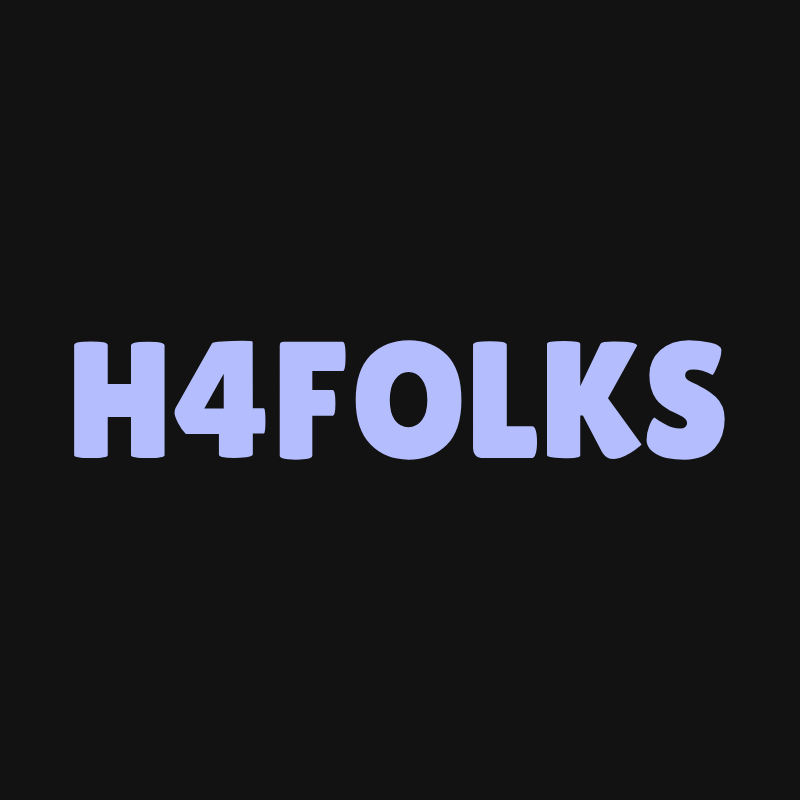
<style>
.page{position:relative;width:800px;height:800px;background:#121212}
.page>*{position:absolute;margin:0}
.t1{font:166.2px "LilitaOne";color:#b4befe}
</style>
<div class="page">
<p class="t1" style="left:74px;top:340px;width:651px;height:120px">H4FOLKS</p>
</div>
